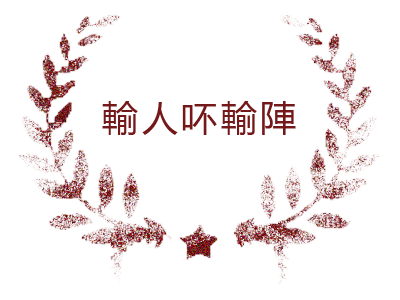
<style>
.page{position:relative;width:400px;height:300px;background:#ffffff}
.page>*{position:absolute;margin:0}
.t1{font:36px "MicrosoftYaHei";letter-spacing:0.1em;color:#74181a}
</style>
<div class="page">
<p class="t1" style="left:102px;top:101px;width:194px;height:34px">輸人吥輸陣</p>
</div>
